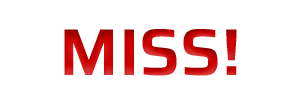
<style>
.page{position:relative;width:300px;height:100px;background:#ffffff}
.page>*{position:absolute;margin:0}
.t1{font:66.2px "SairaRoman-SemiBold";color:#cd0000}
</style>
<div class="page">
<p class="t1" style="left:64px;top:29px;width:173px;height:47px">MISS!</p>
</div>
